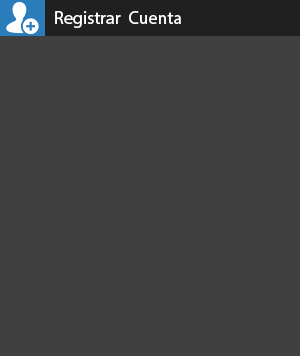
<style>
.page{position:relative;width:300px;height:356px;background:#404040}
.page>*{position:absolute;margin:0}
.t1{font:18px "MyriadPro-Regular";color:#ffffff}
</style>
<div class="page">
<p class="t1" style="left:55px;top:11px;width:126px;height:17px">Registrar  Cuenta</p>
</div>
